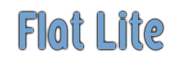
<style>
.page{position:relative;width:180px;height:60px;background:#ffffff}
.page>*{position:absolute;margin:0}
.t1{font:46px "Sister-Medium";color:#73a4d1;scale:0.86 1}
</style>
<div class="page">
<p class="t1" style="left:19px;top:11px;width:144px;height:39px">Flat Lite</p>
</div>
